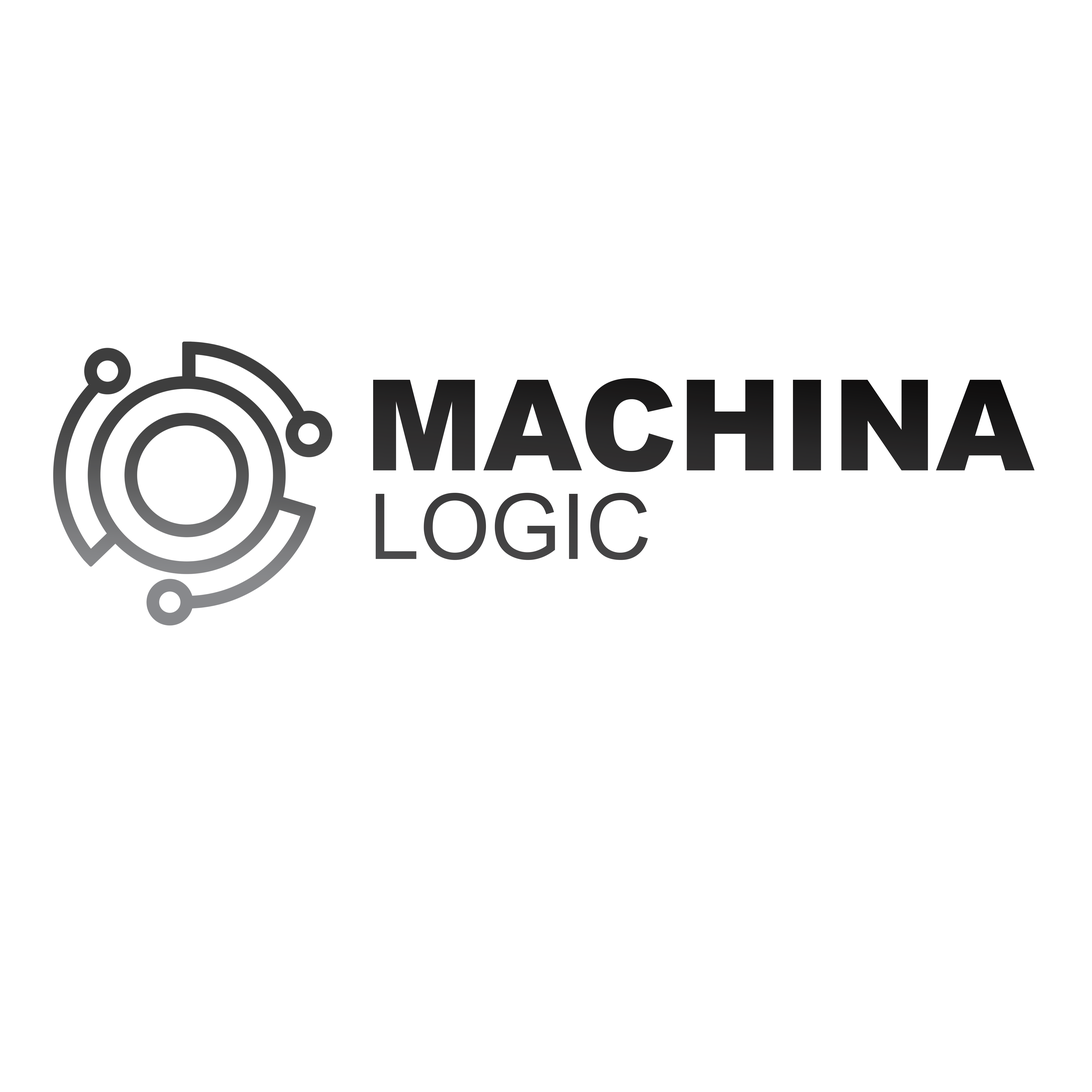
<style>
.page{position:relative;width:1092px;height:1092px;background:#ffffff}
.page>*{position:absolute;margin:0}
.t1{font:126.6px "Arial-Black";color:#252324}
.t2{font:90.9px "ArialMT";color:#424141}
</style>
<div class="page">
<p class="t1" style="left:373px;top:378px;width:662px;height:94px">MACHINA</p>
<p class="t2" style="left:376px;top:493px;width:272px;height:67px">LOGIC</p>
</div>
